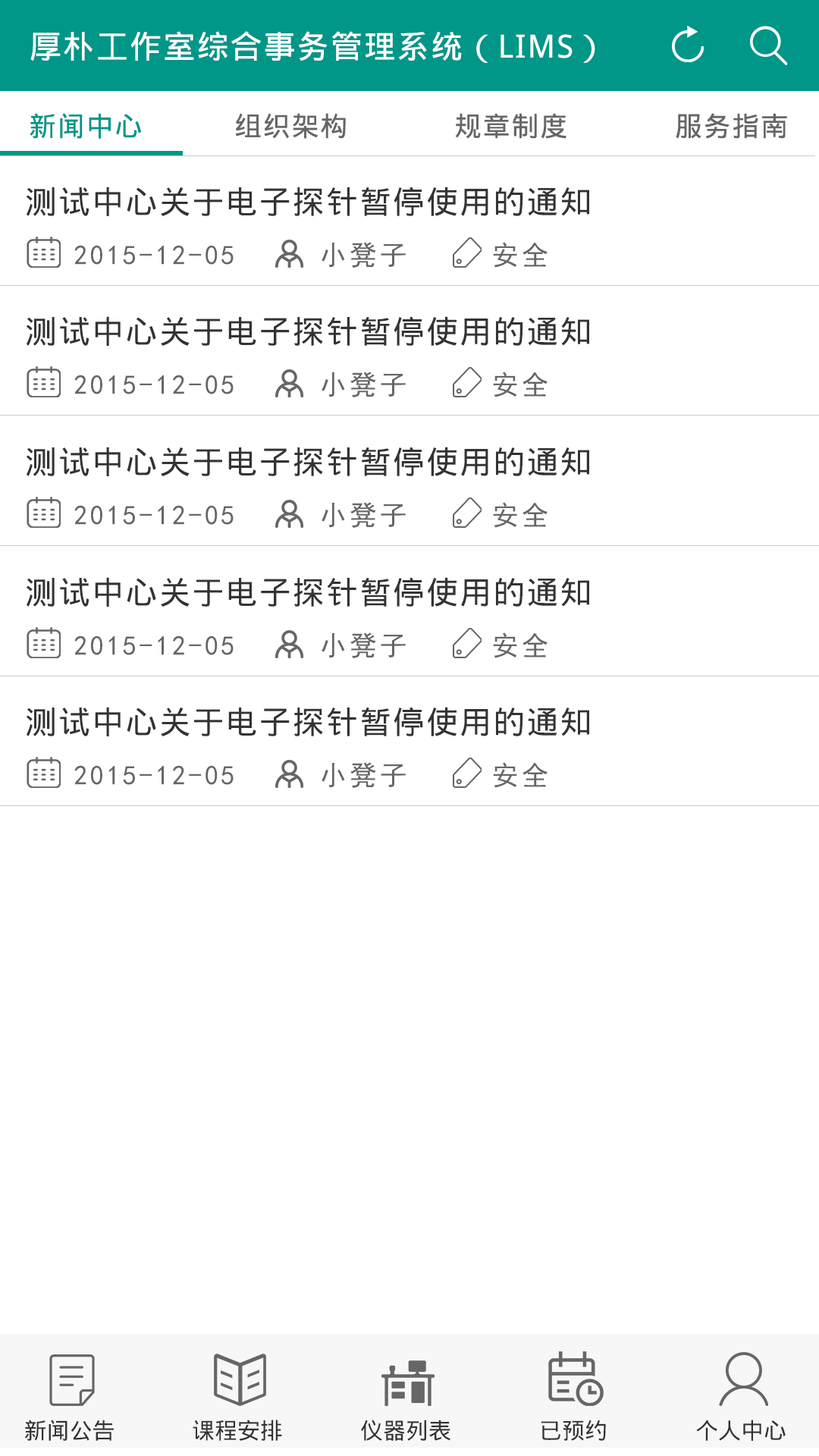
<style>
.page{position:relative;width:819px;height:1456px;background:#ffffff}
.page>*{position:absolute;margin:0}
.t1{font:31.8px "DroidSansFallback";letter-spacing:0.05em;color:#ffffff}
.t2{font:27.3px "DroidSansFallback";letter-spacing:0.05em;color:#009688}
.t3{font:27.3px "DroidSansFallback";letter-spacing:0.05em;color:#666666}
.t4{font:31.8px "DroidSansFallback";letter-spacing:0.05em;color:#333333}
.t5{font:27.3px "SimHei";letter-spacing:0.1em;color:#666666}
.t6{font:22.7px "DroidSansFallback";color:#333333}
</style>
<div class="page">
<p class="t1" style="left:30px;top:31px;width:565px;height:32px">厚朴工作室综合事务管理系统（LIMS）</p>
<p class="t2" style="left:30px;top:113px;width:111px;height:26px">新闻中心</p>
<p class="t3" style="left:235px;top:113px;width:111px;height:26px">组织架构</p>
<p class="t3" style="left:455px;top:113px;width:111px;height:26px">规章制度</p>
<p class="t3" style="left:676px;top:113px;width:111px;height:26px">服务指南</p>
<p class="t4" style="left:26px;top:187px;width:563px;height:29px">测试中心关于电子探针暂停使用的通知</p>
<p class="t5" style="left:74px;top:242px;width:474px;height:26px">2015-12-05     小凳子     安全</p>
<p class="t4" style="left:26px;top:316px;width:563px;height:30px">测试中心关于电子探针暂停使用的通知</p>
<p class="t5" style="left:74px;top:372px;width:474px;height:25px">2015-12-05     小凳子     安全</p>
<p class="t4" style="left:26px;top:447px;width:563px;height:29px">测试中心关于电子探针暂停使用的通知</p>
<p class="t5" style="left:74px;top:502px;width:474px;height:26px">2015-12-05     小凳子     安全</p>
<p class="t4" style="left:26px;top:577px;width:563px;height:30px">测试中心关于电子探针暂停使用的通知</p>
<p class="t5" style="left:74px;top:632px;width:474px;height:26px">2015-12-05     小凳子     安全</p>
<p class="t4" style="left:26px;top:707px;width:563px;height:29px">测试中心关于电子探针暂停使用的通知</p>
<p class="t5" style="left:74px;top:762px;width:474px;height:26px">2015-12-05     小凳子     安全</p>
<p class="t6" style="left:24px;top:1420px;width:90px;height:21px">新闻公告</p>
<p class="t6" style="left:193px;top:1420px;width:89px;height:21px">课程安排</p>
<p class="t6" style="left:361px;top:1420px;width:89px;height:21px">仪器列表</p>
<p class="t6" style="left:541px;top:1420px;width:65px;height:21px">已预约</p>
<p class="t6" style="left:696px;top:1420px;width:90px;height:21px">个人中心</p>
</div>
